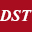
<style>
.page{position:relative;width:32px;height:32px;background:#a80d1f}
.page>*{position:absolute;margin:0}
.t1{font:20px "Aparajita-BoldItalic";color:#ffffff}
</style>
<div class="page">
<p class="t1" style="left:0px;top:10px;width:32px;height:11px">DST</p>
</div>
